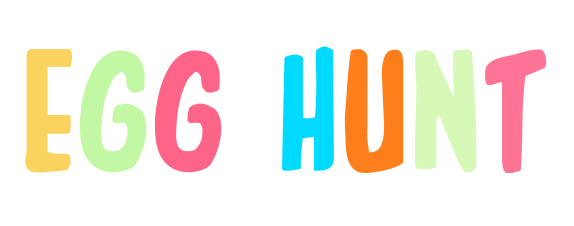
<style>
.page{position:relative;width:574px;height:226px;background:#ffffff}
.page>*{position:absolute;margin:0}
.t1{font:209.1px "In-HouseEdition";color:#fad35e;text-transform:uppercase}
.t2{font:209.1px "In-HouseEdition";color:#c2f8a4;text-transform:uppercase}
.t3{font:209.1px "In-HouseEdition";color:#fe6488;text-transform:uppercase}
.t4{font:209.1px "In-HouseEdition";color:#00dafe;text-transform:uppercase}
.t5{font:209.1px "In-HouseEdition";color:#fd7f1b;text-transform:uppercase}
.t6{font:209.1px "In-HouseEdition";color:#d6f9b7;text-transform:uppercase}
.t7{font:209.1px "In-HouseEdition";color:#ff7396;text-transform:uppercase}
</style>
<div class="page">
<p class="t1" style="left:25px;top:46px;width:522px;height:127px">E<span class="t2">G</span><span class="t3">G </span><span class="t4">H</span><span class="t5">U</span><span class="t6">N</span><span class="t7">T</span></p>
</div>
